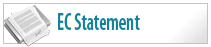
<style>
.page{position:relative;width:211px;height:47px;background:#ffffff}
.page>*{position:absolute;margin:0}
.t1{font:24px "MyriadPro-SemiboldCond";color:#11839a;scale:0.78 1}
</style>
<div class="page">
<p class="t1" style="left:58px;top:13px;width:82px;height:17px">EC Statement</p>
</div>
